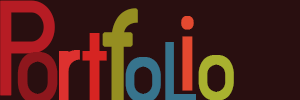
<style>
.page{position:relative;width:300px;height:100px;background:#290f10}
.page>*{position:absolute;margin:0}
.t1{font:156px "supermarket";color:#b61c24;font-weight:bold;scale:0.84 1}
.t2{font:143.9px "supermarket";color:#958e21;font-weight:bold;scale:0.77 1}
.t3{font:115.8px "supermarket";color:#e34930;font-weight:bold;scale:0.8 1}
.t4{font:108px "supermarket";color:#dd312f;font-weight:bold;scale:0.83 1}
.t5{font:108px "supermarket";color:#d62422;font-weight:bold;scale:0.83 1}
.t6{font:96px "supermarket";color:#a9b12f;font-weight:bold;scale:0.83 1}
</style>
<div class="page">
<p class="t1" style="left:0px;top:0px;width:55px;height:96px">P</p>
<p class="t2" style="left:102px;top:8px;width:36px;height:94px">f</p>
<p class="t3" style="left:181px;top:16px;width:13px;height:75px">i</p>
<p class="t4" style="left:59px;top:33px;width:48px;height:69px">r<span class="t5">t</span></p>
<p class="t6" style="left:198px;top:55px;width:36px;height:46px">o</p>
</div>
